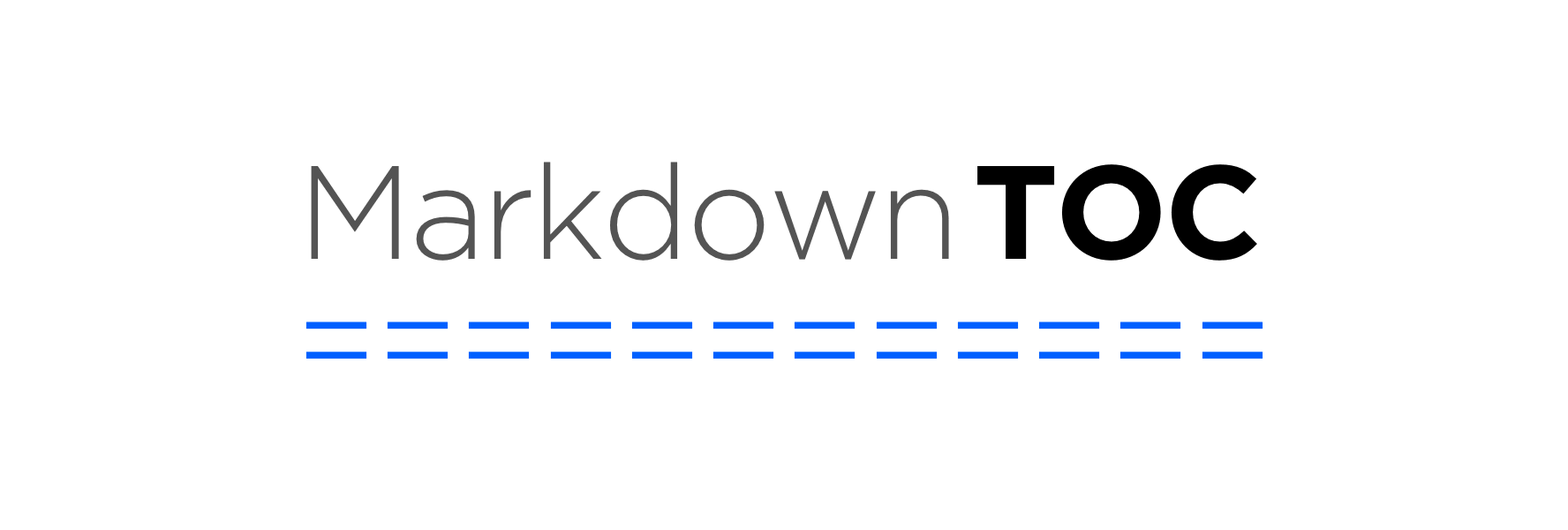
<style>
.page{position:relative;width:1568px;height:530px;background:#ffffff}
.page>*{position:absolute;margin:0}
.t1{font:132.4px "Gotham-Light";letter-spacing:-0.025em;color:#545454}
.t2{font:132.4px "Gotham-Bold";letter-spacing:-0.025em;color:#000000}
.t3{font:132.4px "Gotham-Light";letter-spacing:-0.025em;color:#0060ff}
</style>
<div class="page">
<p class="t1" style="left:311px;top:162px;width:946px;height:98px">Markdown<span class="t2">TOC</span></p>
<p class="t3" style="left:305px;top:321px;width:958px;height:37px">============</p>
</div>
